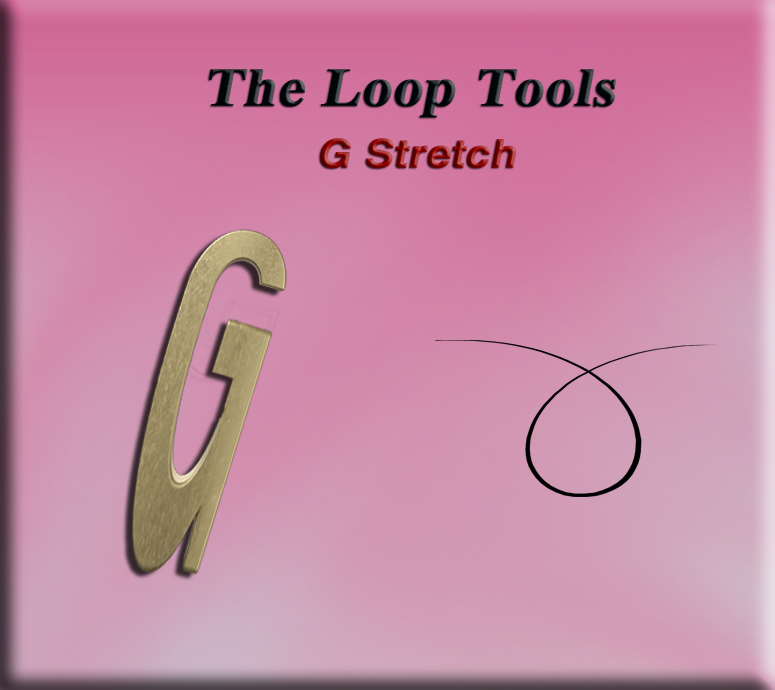
<style>
.page{position:relative;width:775px;height:690px}
.page>*{position:absolute;margin:0}
.t1{font:53.9px "TimesNewRomanPS-BoldMT";color:#000609;font-weight:bold;font-style:italic;scale:1.08 1}
.t2{font:39.1px "HelveticaLTStd-Bold";font-weight:bold;font-style:italic;scale:1.08 1}
.t3{font:53.9px "TimesNewRomanPS-BoldMT";font-weight:bold;font-style:italic;scale:1.08 1}
</style>
<div class="page">
<p class="t1" style="left:209px;top:69px;width:407px;height:49px">The Loop Tools</p>
<p class="t2" style="left:320px;top:138px;width:196px;height:31px"><span class="t3"> </span>G Stretch</p>
</div>
